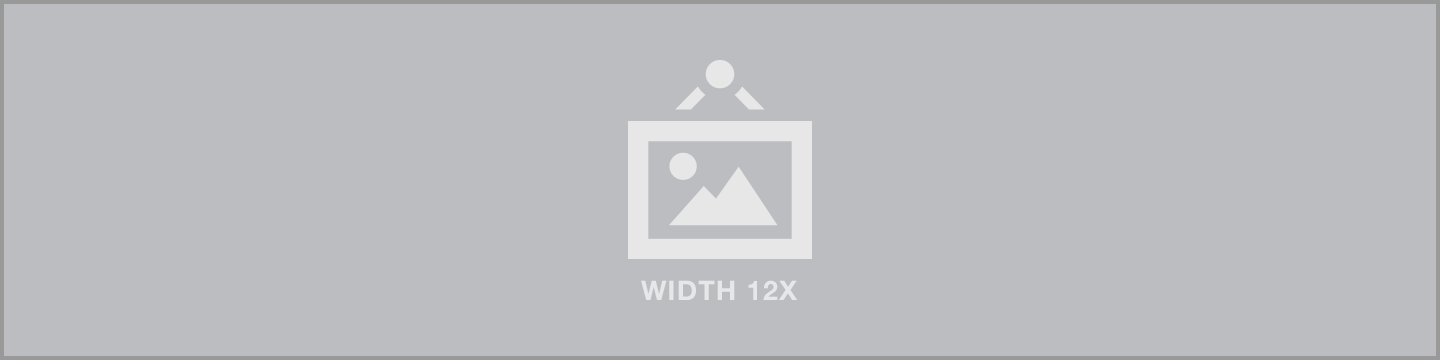
<style>
.page{position:relative;width:1440px;height:360px;background:#bcbdc0}
.page>*{position:absolute;margin:0}
.t1{font:27px "HelveticaNeue-Bold";letter-spacing:0.05em;color:#e6e7e8;text-transform:uppercase}
</style>
<div class="page">
<p class="t1" style="left:641px;top:280px;width:157px;height:20px">Width 12X</p>
</div>
